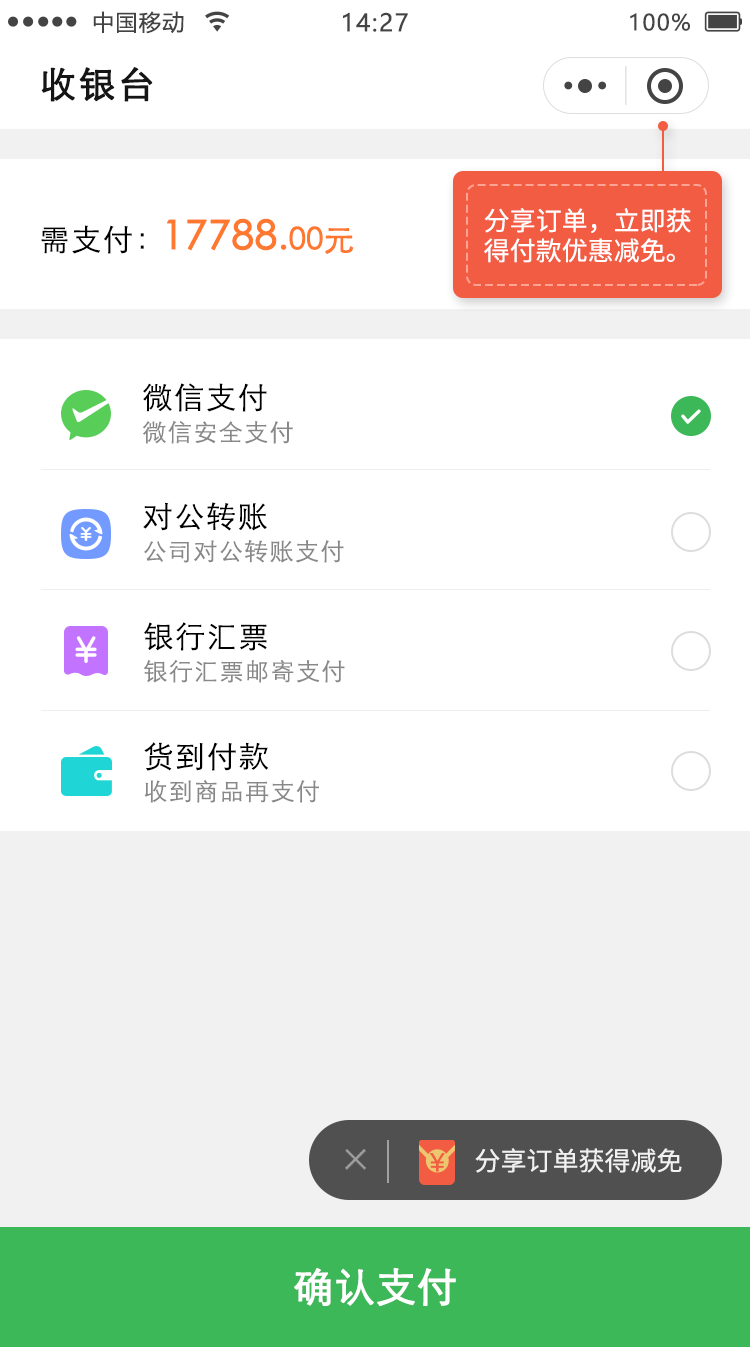
<style>
.page{position:relative;width:750px;height:1347px;background:#ffffff}
.page>*{position:absolute;margin:0}
.t1{font:22px "MicrosoftYaHei";letter-spacing:0.06em;color:#444444}
.t2{font:24px "MicrosoftYaHei";letter-spacing:0.06em;color:#444444}
.t3{font:36px "STXihei";letter-spacing:0.06em;color:#151515;font-weight:bold}
.t4{font:26px/30px "NotoSansCJKsc-Regular";color:#ffffff}
.t5{font:40px "STXihei";color:#ff782f;font-weight:bold}
.t6{font:36px "STXihei";color:#ff782f;font-weight:bold}
.t7{font:30px "STXihei";color:#ff782f;font-weight:bold}
.t8{font:30px "STXihei";letter-spacing:0.06em;color:#000000}
.t9{font:24px "STXihei";letter-spacing:0.06em;color:#888888}
.t10{font:26px "NotoSansCJKsc-Regular";color:#f0f1f0}
.t11{font:40px "STXihei";color:#ffffff;font-weight:bold}
</style>
<div class="page">
<p class="t1" style="left:93px;top:11px;width:91px;height:23px">中国移动</p>
<p class="t2" style="left:343px;top:12px;width:65px;height:20px">14:27</p>
<p class="t1" style="left:630px;top:13px;width:60px;height:18px">100%</p>
<p class="t3" style="left:41px;top:67px;width:112px;height:35px">收银台</p>
<p class="t4" style="left:484px;top:208px;width:207px;height:55px">分享订单，立即获<br>得付款优惠减免。</p>
<p class="t5" style="left:167px;top:218px;width:187px;height:36px">17788<span class="t6">.</span><span class="t7">00元</span></p>
<p class="t8" style="left:41px;top:225px;width:103px;height:29px">需支付：</p>
<p class="t8" style="left:143px;top:383px;width:124px;height:29px">微信支付</p>
<p class="t9" style="left:143px;top:421px;width:150px;height:23px">微信安全支付</p>
<p class="t8" style="left:143px;top:502px;width:124px;height:29px">对公转账</p>
<p class="t9" style="left:144px;top:540px;width:200px;height:23px">公司对公转账支付</p>
<p class="t8" style="left:144px;top:622px;width:123px;height:29px">银行汇票</p>
<p class="t9" style="left:144px;top:659px;width:201px;height:24px">银行汇票邮寄支付</p>
<p class="t8" style="left:144px;top:742px;width:125px;height:29px">货到付款</p>
<p class="t9" style="left:144px;top:780px;width:175px;height:23px">收到商品再支付</p>
<p class="t10" style="left:475px;top:1148px;width:207px;height:25px">分享订单获得减免</p>
<p class="t11" style="left:294px;top:1267px;width:162px;height:40px">确认支付</p>
</div>
